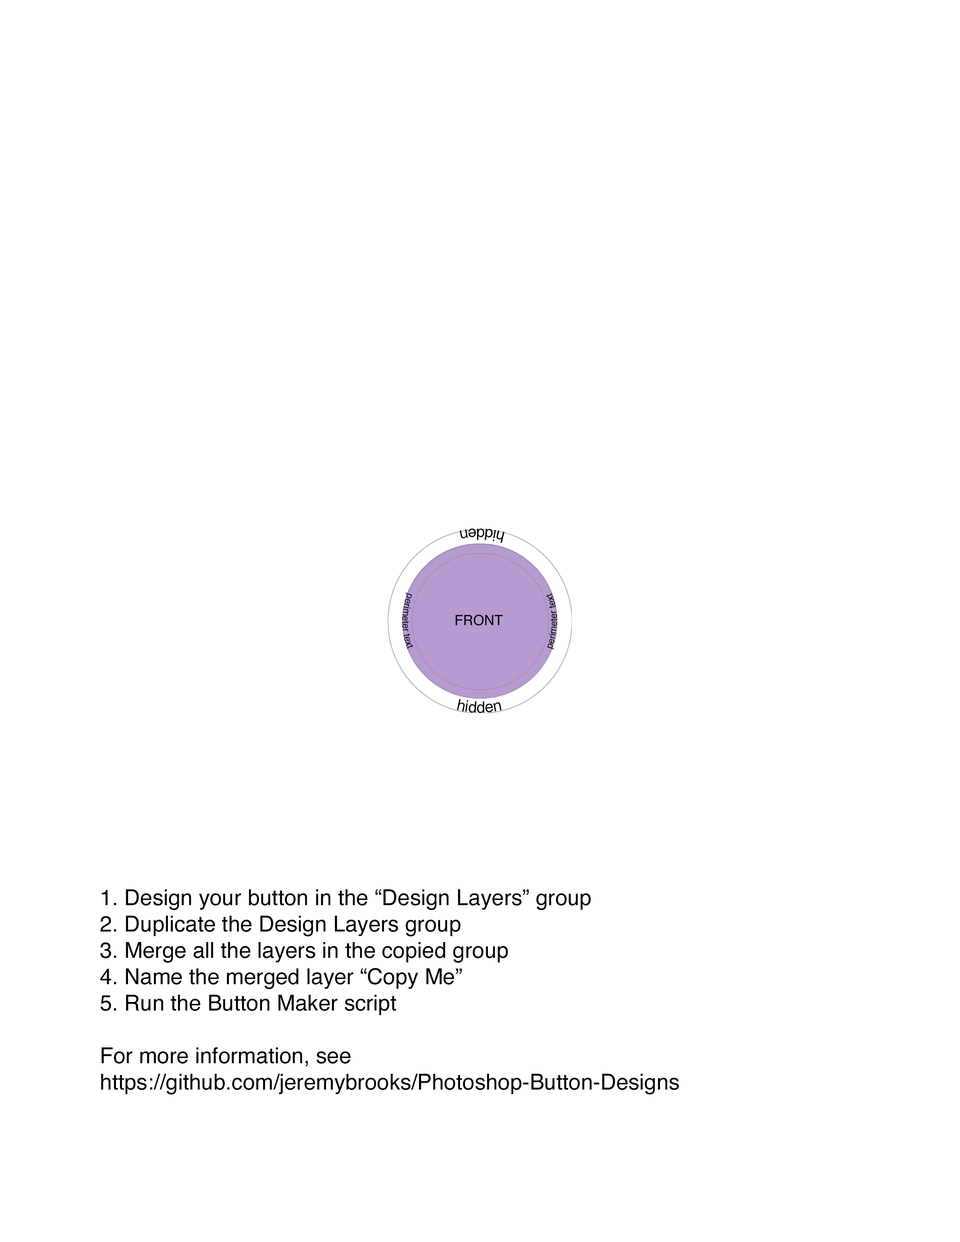
<style>
.page{position:relative;width:960px;height:1242px;background:#ffffff}
.page>*{position:absolute;margin:0}
.t1{font:15.7px "Helvetica";color:#000000}
.t2{font:9.4px "Helvetica";color:#000000}
.t3{font:14.1px "Helvetica";color:#000000}
.t4{font:22px "Helvetica";color:#000000}
</style>
<div class="page">
<p class="t1" style="left:460px;top:529px;width:44px;height:14px;rotate:45deg">hidden</p>
<p class="t2" style="left:402px;top:593px;width:11px;height:56px;text-align:center">perimeter text</p>
<p class="t2" style="left:546px;top:593px;width:11px;height:57px;text-align:center">perimeter text</p>
<p class="t3" style="left:455px;top:615px;width:48px;height:11px">FRONT</p>
<p class="t1" style="left:457px;top:699px;width:45px;height:14px;rotate:45deg">hidden</p>
<p class="t4" style="left:100px;top:889px;width:579px;height:206px">1. Design your button in the “Design Layers” group<br>2. Duplicate the Design Layers group<br>3. Merge all the layers in the copied group<br>4. Name the merged layer “Copy Me”<br>5. Run the Button Maker script<br><br>For more information, see<br>https://github.com/jeremybrooks/Photoshop-Button-Designs</p>
</div>
